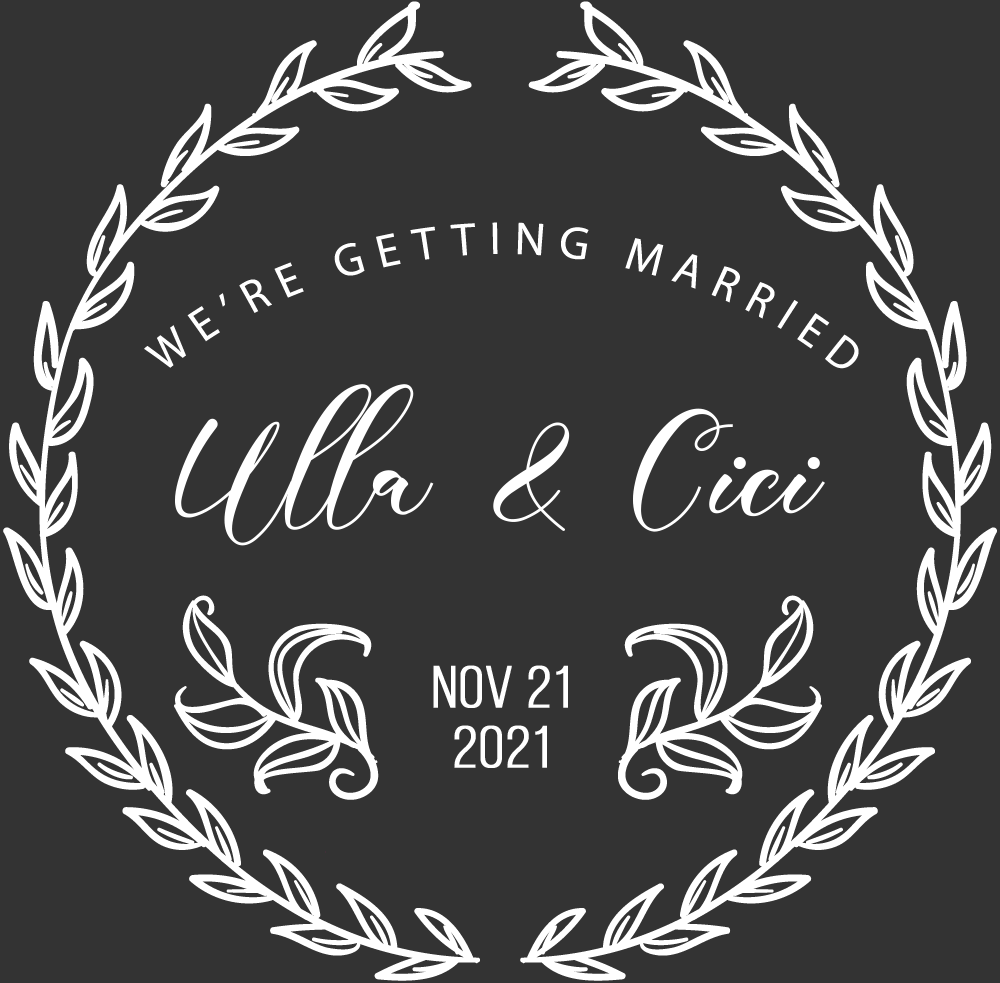
<style>
.page{position:relative;width:1000px;height:983px;background:#333333}
.page>*{position:absolute;margin:0}
.t1{font:171px "PoppyShower";color:#ffffff}
.t2{font:58.7px/59.5px "BebasNeueBook";color:#ffffff;font-weight:bold;scale:1.1 1}
</style>
<div class="page">
<p class="t1" style="left:175px;top:384px;width:650px;height:162px">Ulla &amp; Cici</p>
<p class="t2" style="left:433px;top:665px;width:135px;height:103px;text-align:center">Nov 21<br>2021</p>
</div>
